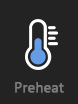
<style>
.page{position:relative;width:78px;height:104px;background:#232323}
.page>*{position:absolute;margin:0}
.t1{font:14px "SegoeUI";color:#7c7c7c;font-weight:bold}
</style>
<div class="page">
<p class="t1" style="left:15px;top:82px;width:49px;height:11px">Preheat</p>
</div>
